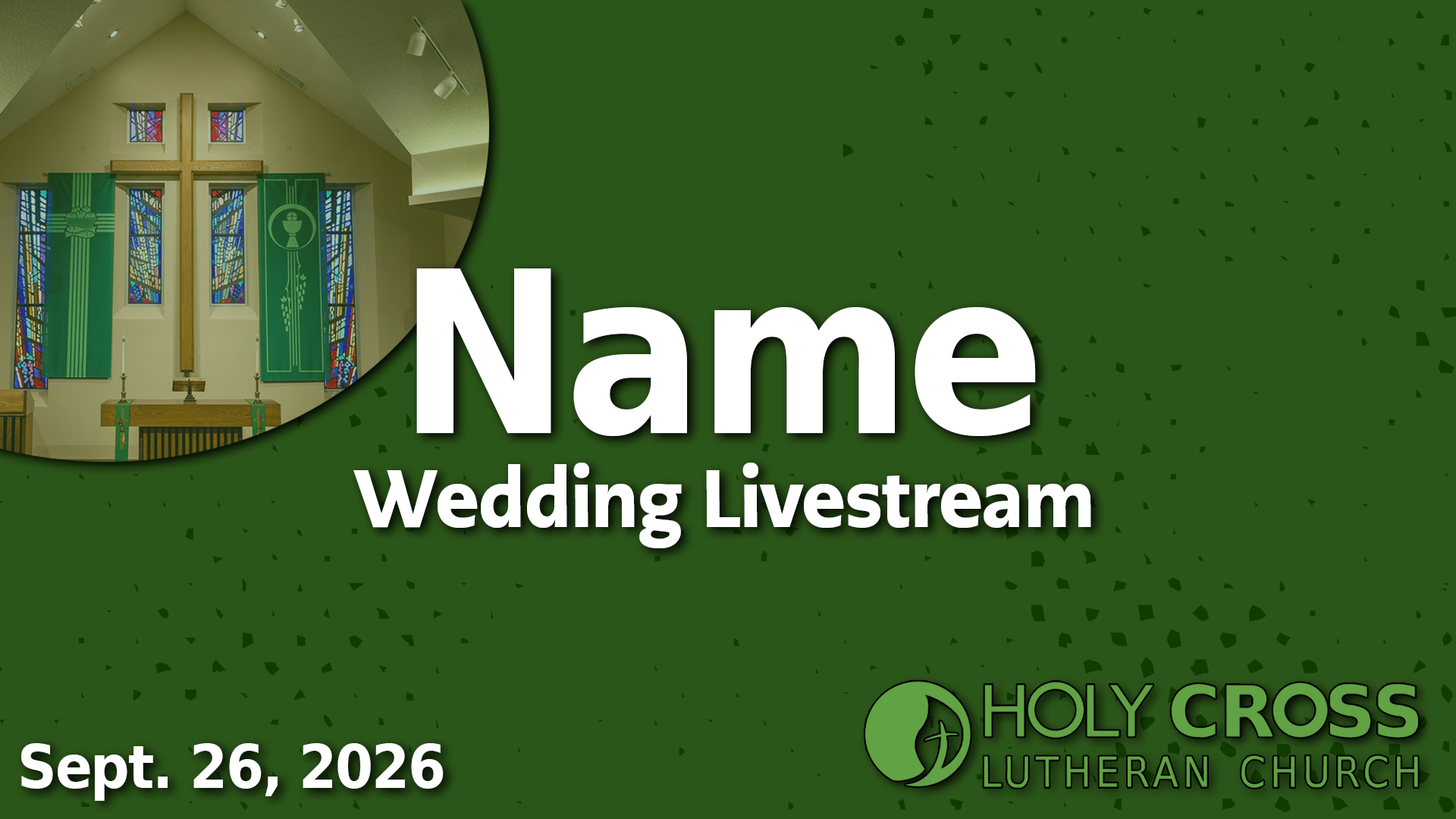
<style>
.page{position:relative;width:1456px;height:819px;background:#2b5619}
.page>*{position:absolute;margin:0}
.t1{font:225.5px "DejaVuSans-Bold";letter-spacing:-0.025em;color:#ffffff;scale:0.91 1}
.t2{font:81.5px "PMNCaeciliaSansText-Blk";letter-spacing:-0.005em;color:#ffffff;scale:0.91 1}
.t3{font:59.7px "DejaVuSans-Bold";letter-spacing:-0.025em;color:#ffffff;scale:0.91 1}
</style>
<div class="page">
<p class="t1" style="left:416px;top:268px;width:620px;height:168px">Name</p>
<p class="t2" style="left:353px;top:463px;width:738px;height:86px">Wedding Livestream</p>
<p class="t3" style="left:21px;top:743px;width:423px;height:58px">Sept. 26, 2026</p>
</div>
